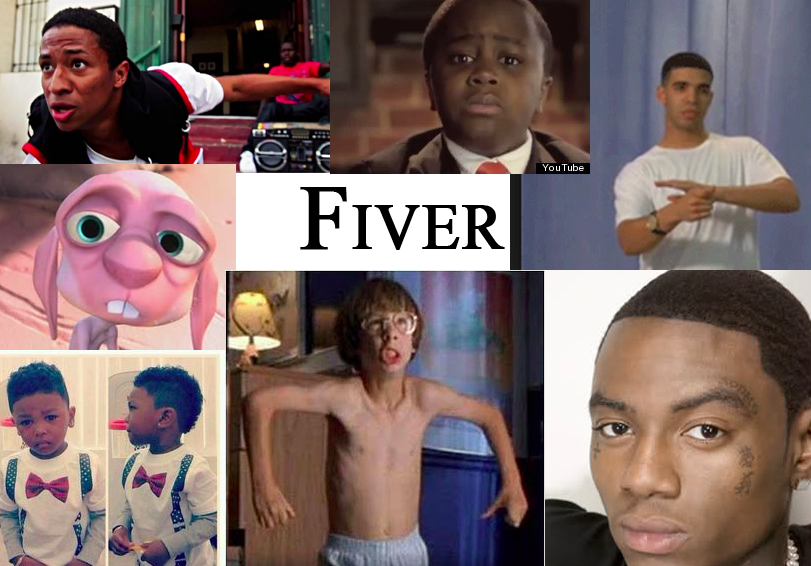
<style>
.page{position:relative;width:811px;height:566px}
.page>*{position:absolute;margin:0}
.t1{font:92.2px "TimesNewRomanPSMT";letter-spacing:0.01em;color:#000000;font-variant:small-caps;font-weight:bold;scale:0.95 1}
</style>
<div class="page">
<p class="t1" style="left:300px;top:187px;width:205px;height:63px">Fiver</p>
</div>
